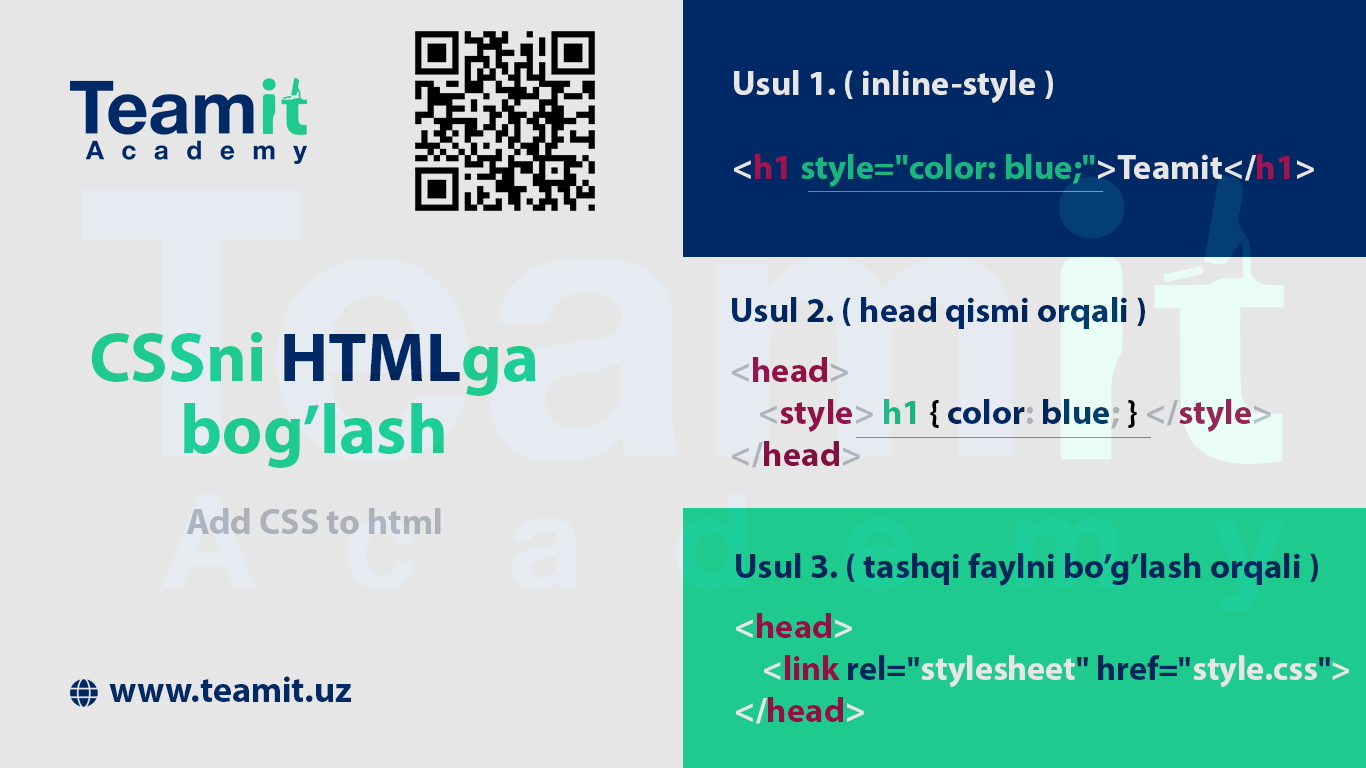
<style>
.page{position:relative;width:1366px;height:768px;background:#e6e6e6}
.page>*{position:absolute;margin:0}
.t1{font:35px "MyriadPro-Bold"}
.t2{font:35px/60px "MyriadPro-Bold";color:#002965}
.t3{font:35px "MyriadPro-Bold";color:#002965}
.t4{font:35px/60px "MyriadPro-Bold";color:#bfc4cb}
.t5{font:35px/60px "MyriadPro-Bold";color:#a1134f}
.t6{font:35px "MyriadPro-Bold";color:#bfc4cb}
.t7{font:35px "MyriadPro-Bold";color:#a1134f}
.t8{font:35px "MyriadPro-Bold";color:#1eca8e}
.t9{font:35px "MyriadPro-Bold";color:#000000}
.t10{font:35px "MyriadPro-Bold";color:#911147}
.t11{font:70px/72px "MyriadPro-Bold";color:#21e09d}
.t12{font:70px/72px "MyriadPro-Bold";color:#002965}
.t13{font:36px "MyriadPro-Bold";color:#bfc4cb}
.t14{font:35px/60px "MyriadPro-Bold";color:#ffffff}
.t15{font:34px "MyriadPro-Bold";color:#ffffff}
.t16{font:34px "MyriadPro-Bold";color:#a1134f}
.t17{font:34px "MyriadPro-Bold";color:#002965}
.t18{font:35px "MyriadPro-Bold";color:#ffffff}
.t19{font:36px "MyriadPro-Bold";color:#002d70}
</style>
<div class="page">
<p class="t1" style="left:734px;top:70px;width:580px;height:117px">Usul 1. ( inline-style )<br><br>&lt;h1 style="color: blue;"&gt;Teamit&lt;/h1&gt;</p>
<p class="t2" style="left:732px;top:297px;width:539px;height:171px"><span class="t3">Usul 2. ( </span>head qismi orqali )<br><span class="t4">&lt;</span><span class="t5">head</span><span class="t4">&gt;<br>    </span><span class="t6">&lt;</span><span class="t7">style</span><span class="t6">&gt; </span><span class="t8">h1</span><span class="t9"> { </span><span class="t3">color</span><span class="t6">: </span><span class="t3">blue</span><span class="t6">;</span><span class="t9"> } </span><span class="t6">&lt;/</span><span class="t7">style</span><span class="t6">&gt;<br>&lt;/</span><span class="t10">head</span><span class="t6">&gt;</span></p>
<p class="t11" style="left:91px;top:332px;width:445px;height:136px;text-align:center">CSSni <span class="t12">HTML</span>ga<br>bog’lash</p>
<p class="t13" style="left:186px;top:508px;width:255px;height:26px">Add CSS to html</p>
<p class="t2" style="left:736px;top:553px;width:613px;height:171px"><span class="t3">Usul 3. ( </span>tashqi faylni bo’g’lash orqali )<br><span class="t14">&lt;</span><span class="t5">head</span><span class="t14">&gt;<br>    </span><span class="t15">&lt;</span><span class="t16">link </span><span class="t17">rel="</span><span class="t15">stylesheet</span><span class="t17">" href="</span><span class="t15">style.css</span><span class="t17">"</span><span class="t15">&gt;<br></span><span class="t18">&lt;/</span><span class="t7">head</span><span class="t18">&gt;</span></p>
<p class="t19" style="left:109px;top:676px;width:242px;height:26px">www.teamit.uz</p>
</div>
